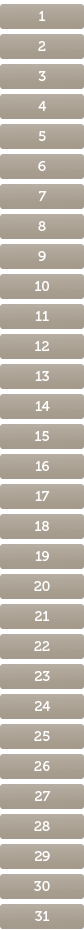
<style>
.page{position:relative;width:84px;height:930px}
.page>*{position:absolute;margin:0}
.t1{font:14px/30px "Museo-500";color:#ffffff;text-transform:uppercase}
</style>
<div class="page">
<p class="t1" style="left:34px;top:11px;width:17px;height:910px;text-align:center">1<br>2<br>3<br>4<br>5<br>6<br>7<br>8<br>9<br>10<br>11<br>12<br>13<br>14<br>15<br>16<br>17<br>18<br>19<br>20<br>21<br>22<br>23<br>24<br>25<br>26<br>27<br>28<br>29<br>30<br>31</p>
</div>
